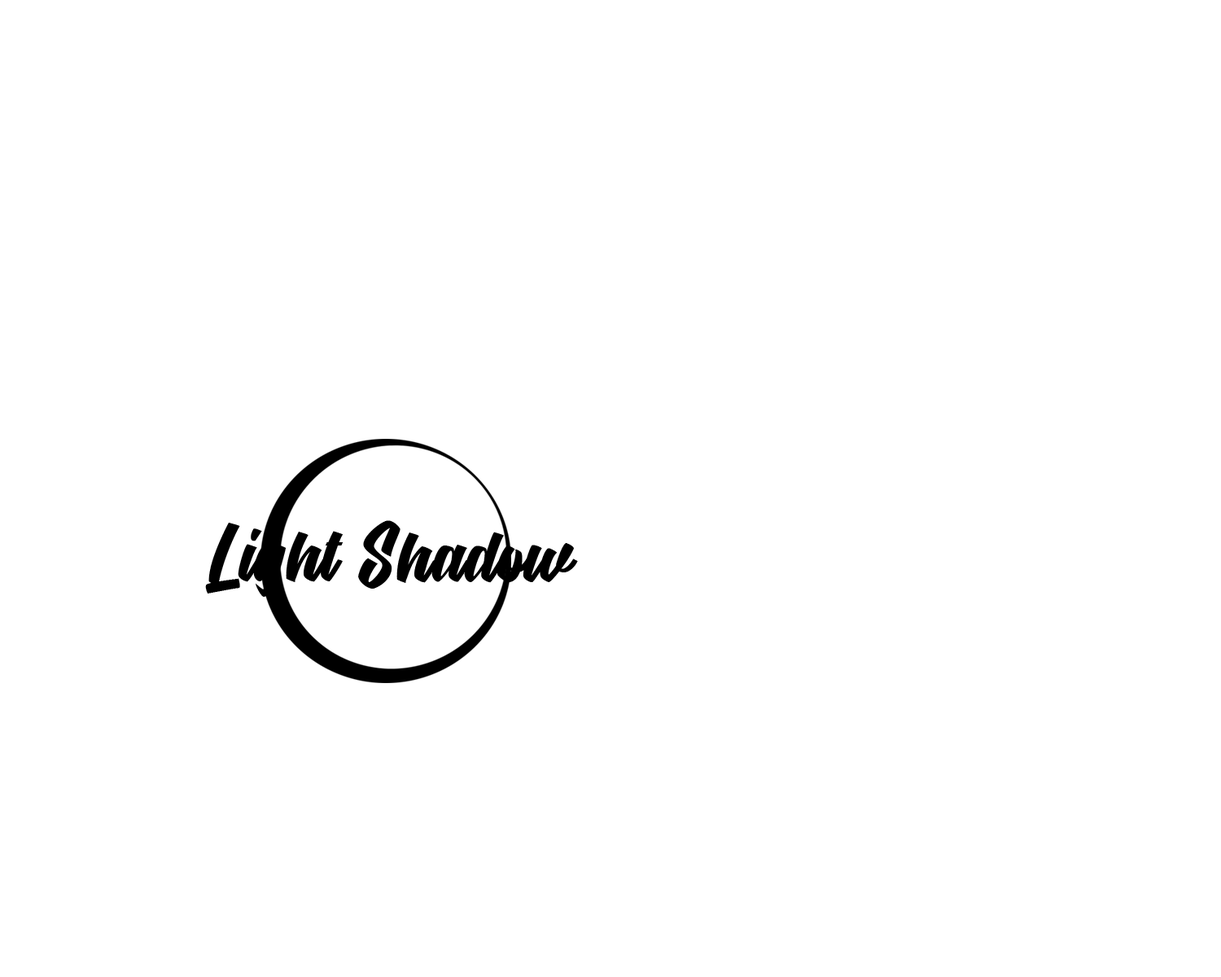
<style>
.page{position:relative;width:1221px;height:977px;background:#ffffff}
.page>*{position:absolute;margin:0}
.t1{font:65.8px "GracelandPersonalUse";letter-spacing:0.025em;color:#000000;scale:0.79 1}
</style>
<div class="page">
<p class="t1" style="left:358px;top:520px;width:220px;height:68px">Shadow</p>
<p class="t1" style="left:205px;top:523px;width:138px;height:74px">Light</p>
</div>
